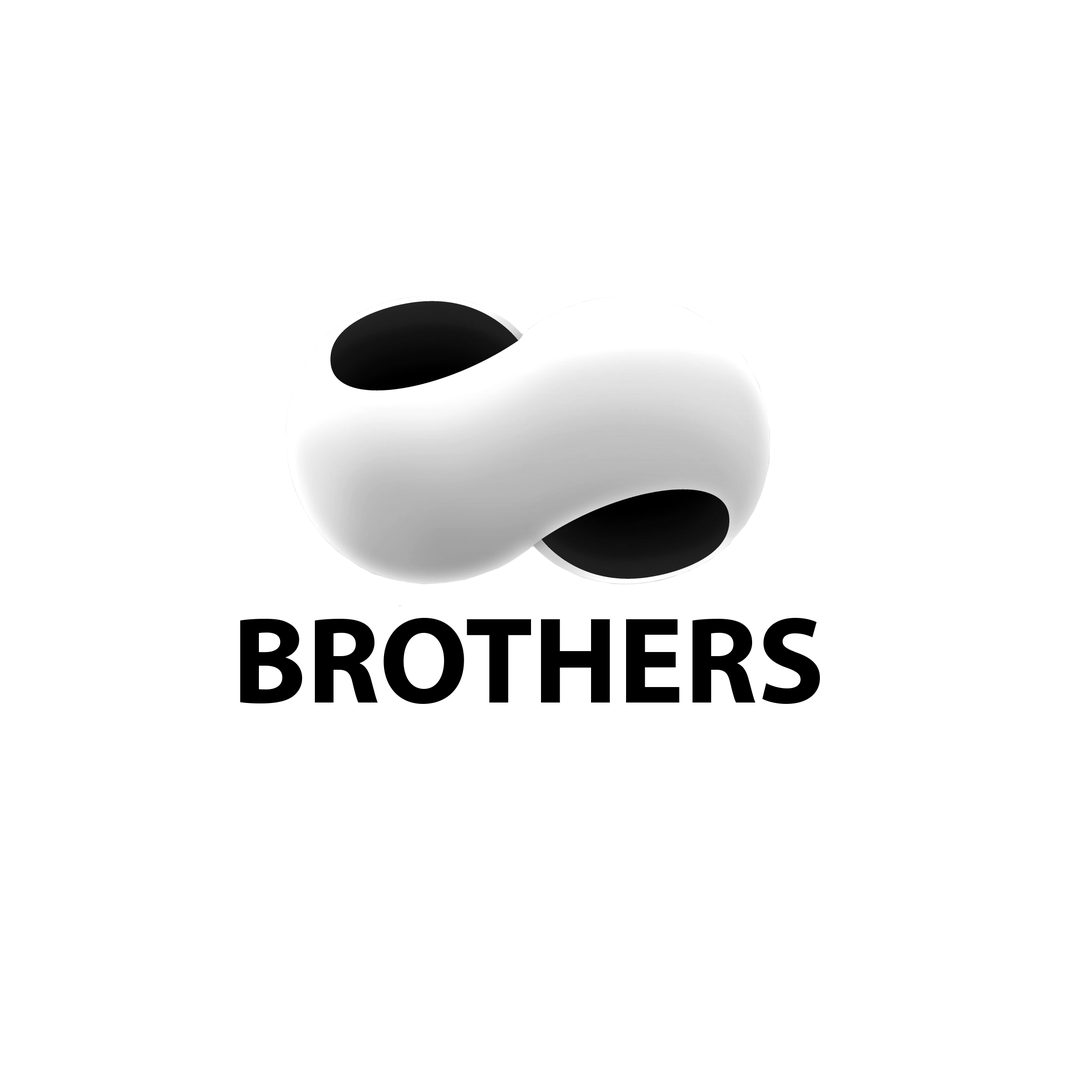
<style>
.page{position:relative;width:1092px;height:1092px;background:#ffffff}
.page>*{position:absolute;margin:0}
.t1{font:123.8px "MyriadPro-Bold";color:#000000}
</style>
<div class="page">
<p class="t1" style="left:240px;top:617px;width:580px;height:87px">BROTHERS</p>
</div>
